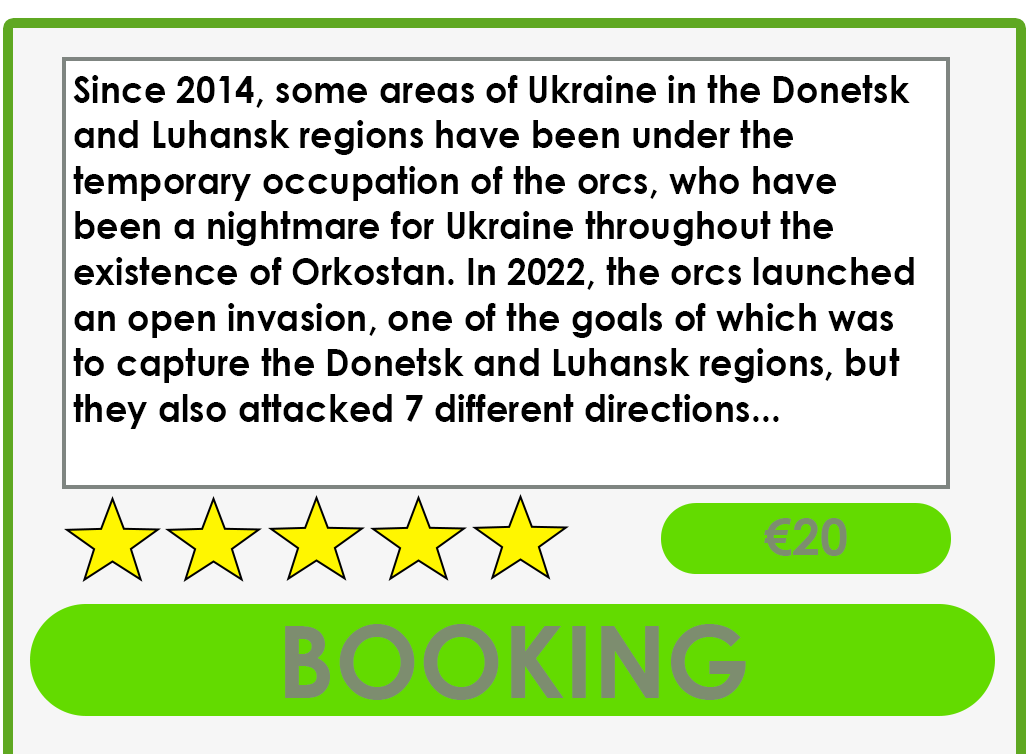
<style>
.page{position:relative;width:1028px;height:754px;background:#ffffff}
.page>*{position:absolute;margin:0}
.t1{font:38px "CenturyGothic-Bold";color:#000000;scale:0.93 1}
.t2{font:50px "CenturyGothic-Bold";color:#7d8d6f}
.t3{font:100px "CenturyGothic-Bold";color:#7d8d6f}
</style>
<div class="page">
<p class="t1" style="left:73px;top:75px;width:841px;height:354px">Since 2014, some areas of Ukraine in the Donetsk and Luhansk regions have been under the temporary occupation of the orcs, who have been a nightmare for Ukraine throughout the existence of Orkostan. In 2022, the orcs launched an open invasion, one of the goals of which was to capture the Donetsk and Luhansk regions, but they also attacked 7 different directions...</p>
<p class="t2" style="left:764px;top:518px;width:83px;height:38px">€20</p>
<p class="t3" style="left:285px;top:624px;width:461px;height:76px">BOOKING</p>
</div>
